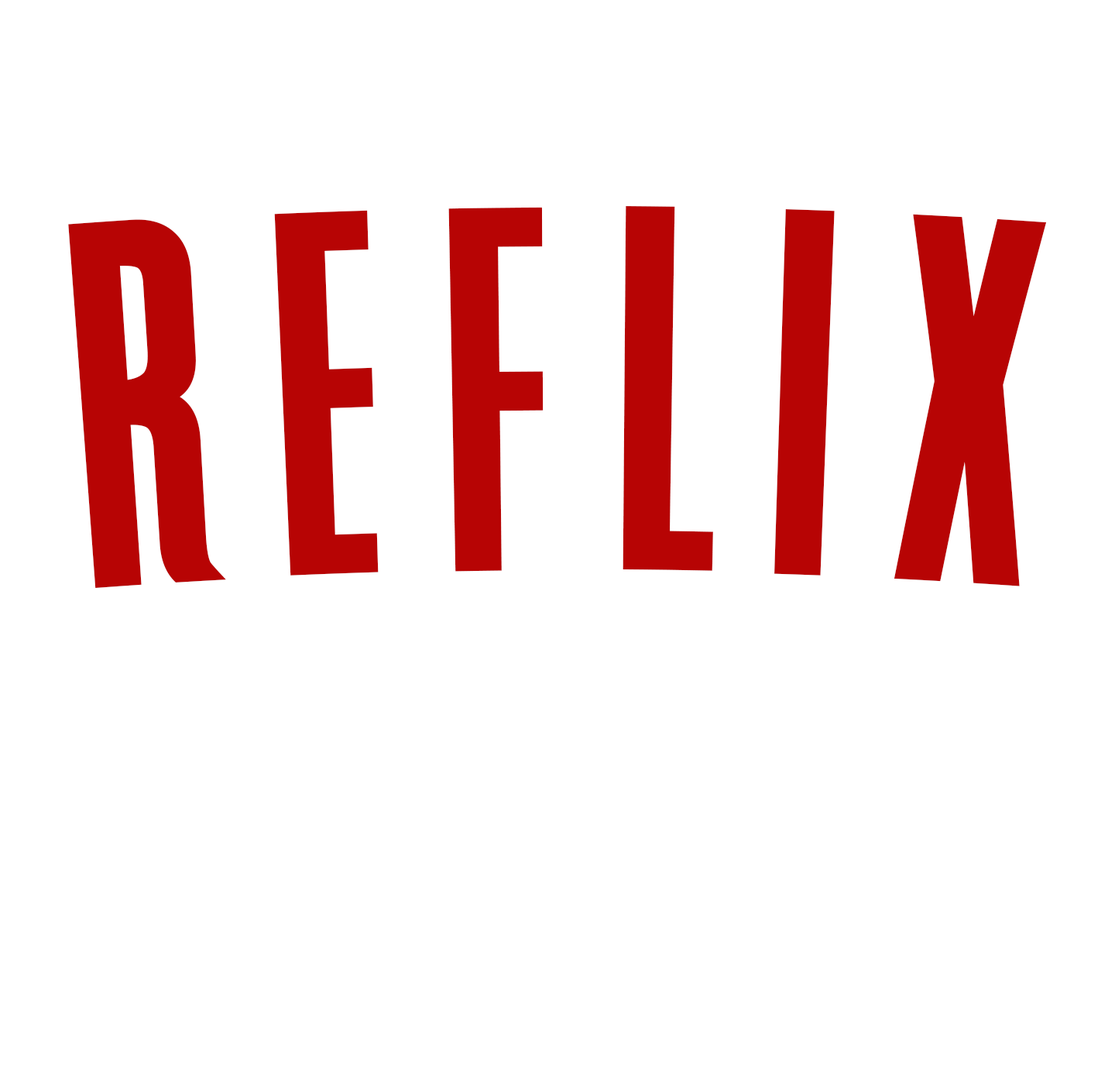
<style>
.page{position:relative;width:1115px;height:1069px;background:#ffffff}
.page>*{position:absolute;margin:0}
.t1{font:476.6px "GraphiqueProNext-Solid";color:#b70404}
</style>
<div class="page">
<p class="t1" style="left:68px;top:206px;width:979px;height:382px">reflix</p>
</div>
